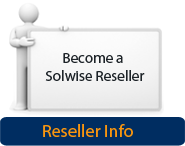
<style>
.page{position:relative;width:185px;height:146px;background:#ffffff}
.page>*{position:absolute;margin:0}
.t1{font:14.8px "MyriadPro-Regular";color:#1d2328}
.t2{font:17.8px "MyriadPro-Regular";color:#f8950f}
</style>
<div class="page">
<p class="t1" style="left:45px;top:53px;width:100px;height:28px;text-align:center">Become a <br>Solwise Reseller</p>
<p class="t2" style="left:43px;top:124px;width:90px;height:13px">Reseller Info</p>
</div>
